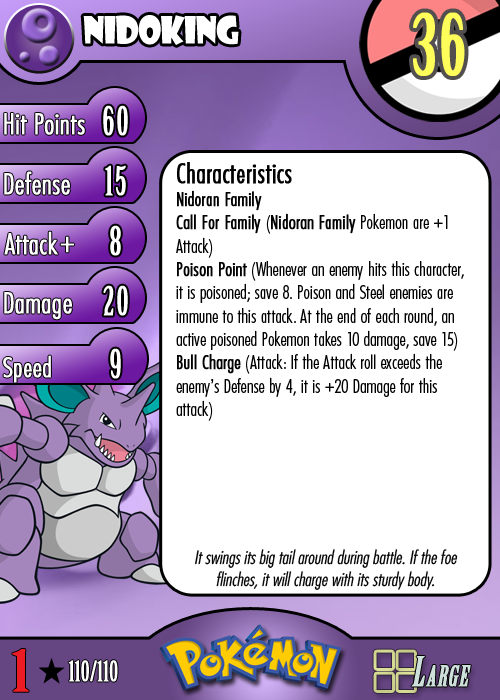
<style>
.page{position:relative;width:500px;height:700px;background:#ffffff}
.page>*{position:absolute;margin:0}
.t1{font:36.7px "ShowcardGothic-Reg";letter-spacing:-0.025em;color:#ffffff;scale:0.91 1}
.t2{font:83.3px "BirchStd";letter-spacing:0.025em;color:#fffd59;font-weight:bold}
.t3{font:27.8px "Futura-CondensedLight";color:#ffffff;font-weight:bold}
.t4{font:38.9px "BirchStd";letter-spacing:0.035em;color:#ffffff;font-weight:bold}
.t5{font:19.4px "FuturaCondensedBQ-Light";color:#010101}
.t6{font:27.8px "FuturaCondensedBQ-Light";color:#010101;font-weight:bold}
.t7{font:19.4px "FuturaCondensedBQ-Light";color:#010101;font-weight:bold}
.t8{font:30.6px "Futura-CondensedLight";color:#ffffff;font-weight:bold}
.t9{font:27.8px "FuturaCondensedBQ-Light";color:#ffffff;font-weight:bold}
.t10{font:18.1px "Futura-CondensedLight";color:#010101;font-style:italic}
.t11{font:55.6px "BirchStd";color:#ed1c24;font-weight:bold;scale:1.5 1}
.t12{font:27.8px "BirchStd";color:#ffffff;font-weight:bold}
</style>
<div class="page">
<p class="t1" style="left:83px;top:15px;width:156px;height:30px">nidoking</p>
<p class="t2" style="left:413px;top:12px;width:52px;height:64px">36</p>
<p class="t3" style="left:4px;top:113px;width:81px;height:22px">Hit Points</p>
<p class="t4" style="left:103px;top:105px;width:25px;height:31px">60</p>
<p class="t3" style="left:4px;top:171px;width:66px;height:24px">Defense</p>
<p class="t4" style="left:105px;top:165px;width:21px;height:31px">15</p>
<p class="t5" style="left:176px;top:162px;width:288px;height:259px"><span class="t6">Characteristics<br></span><span class="t7">Nidoran Family<br>Call For Family</span> (<span class="t7">Nidoran Family</span> Pokemon are +1 Attack)<br><span class="t7">Poison Point</span> (Whenever an enemy hits this character, it is poisoned; save 8. Poison and Steel enemies are immune to this attack. At the end of each round, an active poisoned Pokemon takes 10 damage, save 15)<br><span class="t7">Bull Charge</span> (Attack: If the Attack roll exceeds the enemy’s Defense by 4, it is +20 Damage for this attack)</p>
<p class="t3" style="left:4px;top:231px;width:54px;height:24px">Attack</p>
<p class="t4" style="left:110px;top:225px;width:11px;height:31px">8</p>
<p class="t8" style="left:60px;top:236px;width:14px;height:17px">+</p>
<p class="t3" style="left:4px;top:292px;width:68px;height:28px">Damage</p>
<p class="t4" style="left:103px;top:285px;width:25px;height:31px">20</p>
<p class="t4" style="left:110px;top:348px;width:11px;height:31px">9</p>
<p class="t9" style="left:3px;top:355px;width:48px;height:28px">Speed</p>
<p class="t10" style="left:195px;top:549px;width:263px;height:41px;text-align:center">It swings its big tail around during battle. If the foe flinches, it will charge with its sturdy body.</p>
<p class="t11" style="left:12px;top:649px;width:17px;height:43px">1</p>
<p class="t12" style="left:68px;top:660px;width:50px;height:22px">110/110</p>
</div>
